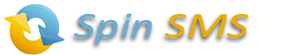
<style>
.page{position:relative;width:300px;height:55px;background:#ffffff}
.page>*{position:absolute;margin:0}
.t1{font:36px "Calibri-Italic";color:#66aed6;scale:1.31 1}
.t2{font:36px "Calibri-Italic";color:#ecad00;scale:1.31 1}
</style>
<div class="page">
<p class="t1" style="left:74px;top:13px;width:175px;height:31px">Spin <span class="t2">SMS</span></p>
</div>
